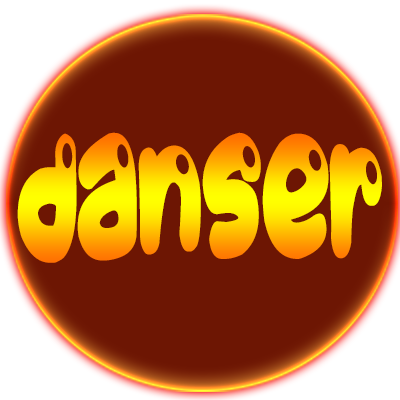
<style>
.page{position:relative;width:400px;height:400px;background:#6d1603}
.page>*{position:absolute;margin:0}
.t1{font:131.5px "JuicyFruity";scale:0.54 1}
</style>
<div class="page">
<p class="t1" style="left:17px;top:132px;width:365px;height:131px">danser</p>
</div>
